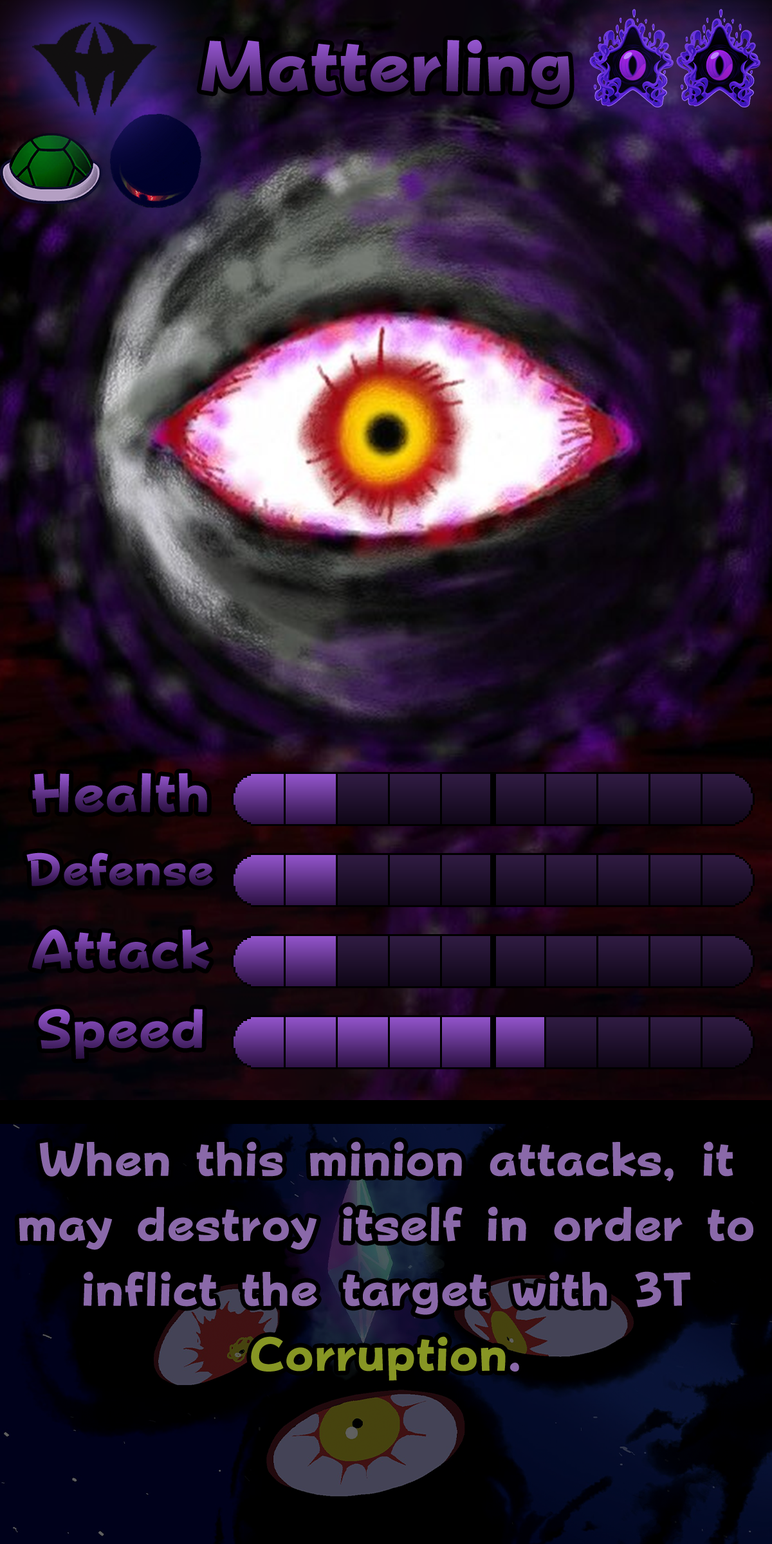
<style>
.page{position:relative;width:772px;height:1544px}
.page>*{position:absolute;margin:0}
.t1{font:122.3px "FOTPopHappinessStrp-ExtraBold"}
.t2{font:92.7px "FOTPopHappinessStrp-ExtraBold"}
.t3{font:77.2px "FOTPopHappinessStrp-ExtraBold"}
.t4{font:81.1px/65px "FOTPopHappinessStrp-ExtraBold";color:#8a69a9}
.t5{font:81.1px/65px "FOTPopHappinessStrp-ExtraBold";color:#879624}
</style>
<div class="page">
<p class="t1" style="left:201px;top:39px;width:369px;height:66px">Matterling</p>
<p class="t2" style="left:32px;top:773px;width:175px;height:40px">Health</p>
<p class="t3" style="left:26px;top:853px;width:188px;height:34px">Defense</p>
<p class="t2" style="left:32px;top:929px;width:178px;height:41px">Attack</p>
<p class="t2" style="left:38px;top:1009px;width:165px;height:50px">Speed</p>
<p class="t4" style="left:19px;top:1141px;width:734px;height:240px;text-align:center">When this minion attacks, it may destroy itself in order to inflict the target with 3T <span class="t5">Corruption</span>.</p>
</div>
